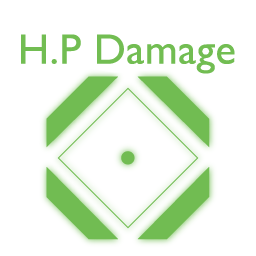
<style>
.page{position:relative;width:256px;height:256px;background:#ffffff}
.page>*{position:absolute;margin:0}
.t1{font:42.7px "GillSansMT";letter-spacing:0.01em;color:#72bd52}
</style>
<div class="page">
<p class="t1" style="left:21px;top:34px;width:214px;height:40px">H.P Damage</p>
</div>
